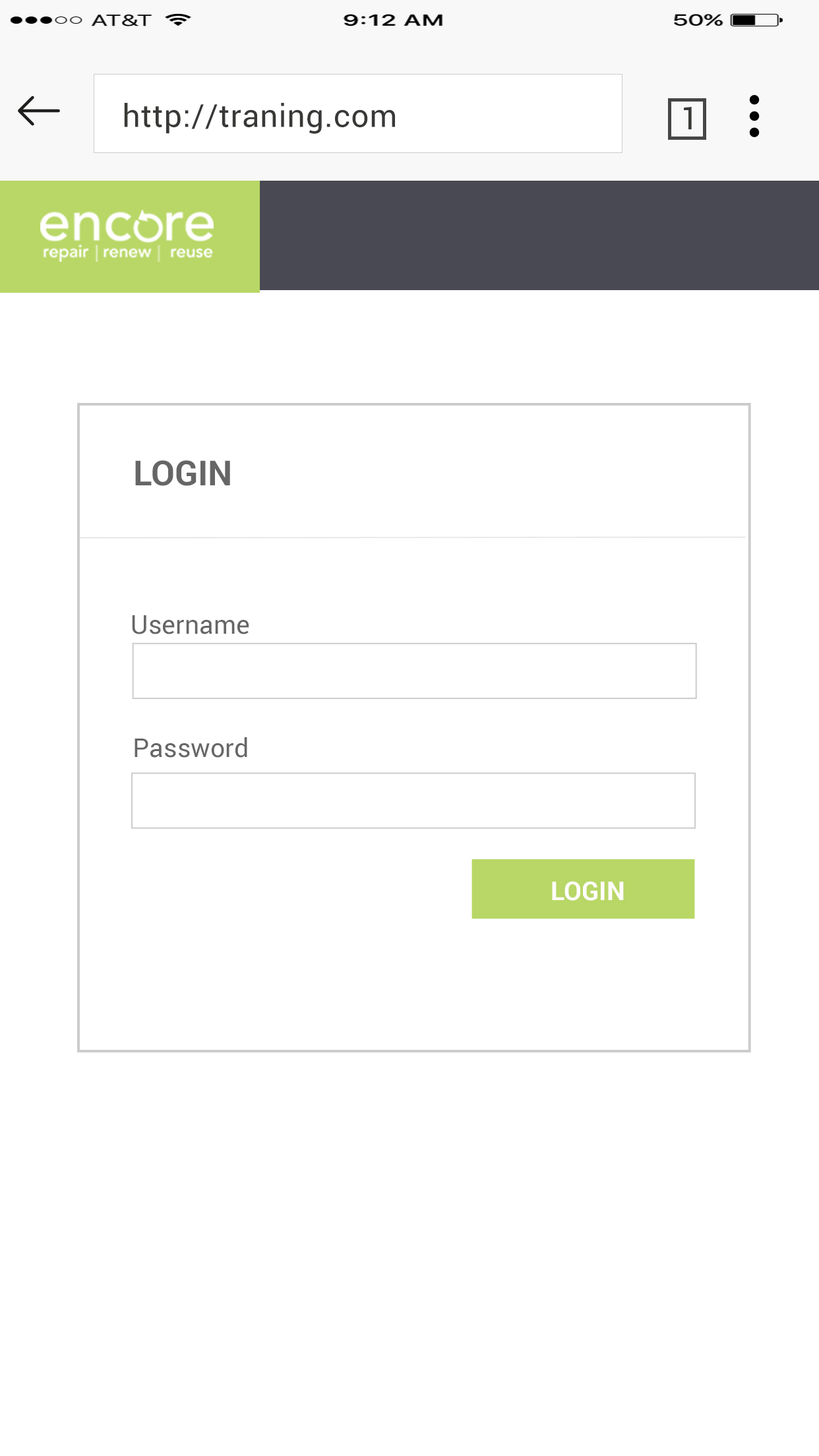
<style>
.page{position:relative;width:819px;height:1456px;background:#ffffff}
.page>*{position:absolute;margin:0}
.t1{font:31.7px "Roboto-Regular";letter-spacing:0.02em;color:#383936}
.t2{font:34.6px "Roboto-Bold";color:#666666}
.t3{font:25.9px "Roboto-Regular";color:#666666}
.t4{font:25.9px "Roboto-Bold";color:#fffcfc}
</style>
<div class="page">
<p class="t1" style="left:124px;top:103px;width:271px;height:31px">http://traning.com</p>
<p class="t1" style="left:684px;top:107px;width:8px;height:23px">1</p>
<p class="t2" style="left:135px;top:460px;width:95px;height:26px">LOGIN</p>
<p class="t3" style="left:132px;top:615px;width:117px;height:19px">Username</p>
<p class="t3" style="left:135px;top:737px;width:112px;height:21px">Password</p>
<p class="t4" style="left:552px;top:881px;width:72px;height:20px">LOGIN</p>
</div>
